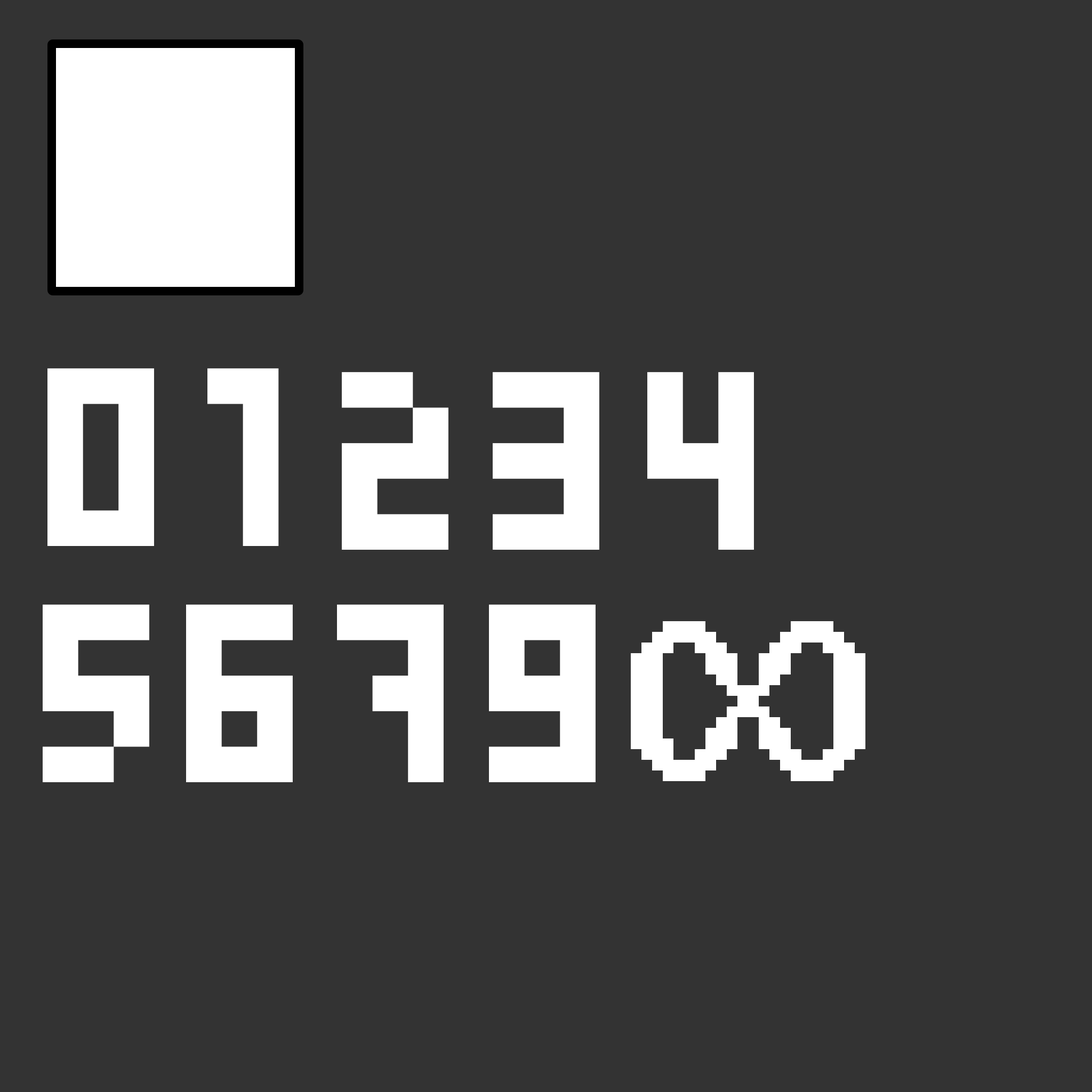
<style>
.page{position:relative;width:1092px;height:1092px;background:#333333}
.page>*{position:absolute;margin:0}
.t1{font:284.4px "Skinny";color:#ffffff}
</style>
<div class="page">
<p class="t1" style="left:47px;top:368px;width:107px;height:178px">0</p>
<p class="t1" style="left:207px;top:368px;width:72px;height:178px">1</p>
<p class="t1" style="left:342px;top:372px;width:106px;height:178px">2</p>
<p class="t1" style="left:493px;top:372px;width:106px;height:178px">3</p>
<p class="t1" style="left:647px;top:372px;width:107px;height:178px">4</p>
<p class="t1" style="left:43px;top:604px;width:106px;height:178px">5</p>
<p class="t1" style="left:186px;top:604px;width:107px;height:178px">6</p>
<p class="t1" style="left:337px;top:604px;width:107px;height:178px">7</p>
<p class="t1" style="left:489px;top:604px;width:107px;height:178px">9</p>
</div>
